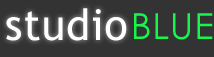
<style>
.page{position:relative;width:214px;height:57px;background:#333333}
.page>*{position:absolute;margin:0}
.t1{font:43px "TrebuchetMS";letter-spacing:0.025em;color:#ffffff}
.t2{font:36px "CenturyGothic";letter-spacing:0.025em;color:#16f74e}
</style>
<div class="page">
<p class="t1" style="left:6px;top:8px;width:121px;height:33px">studio</p>
<p class="t2" style="left:134px;top:13px;width:79px;height:27px">BLUE</p>
</div>
